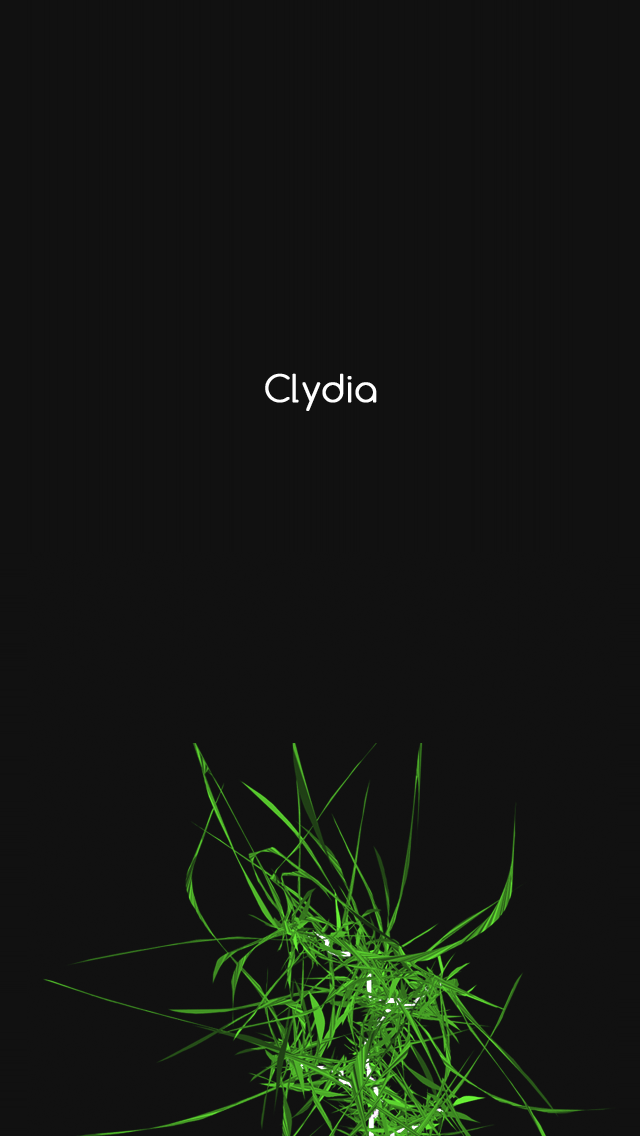
<style>
.page{position:relative;width:640px;height:1136px;background:#111111}
.page>*{position:absolute;margin:0}
.t1{font:36px "Comfortaa-Light";color:#ffffff;font-weight:bold}
</style>
<div class="page">
<p class="t1" style="left:265px;top:373px;width:112px;height:38px">Clydia</p>
</div>
